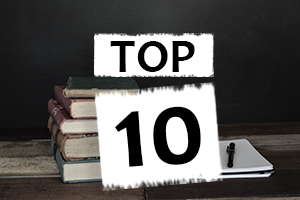
<style>
.page{position:relative;width:300px;height:200px}
.page>*{position:absolute;margin:0}
.t1{font:48px "Candara-Bold";color:#000000}
.t2{font:106.2px "Candara-Bold";color:#000000}
</style>
<div class="page">
<p class="t1" style="left:110px;top:41px;width:85px;height:31px">TOP</p>
<p class="t2" style="left:115px;top:106px;width:86px;height:61px;rotate:-5deg">10</p>
</div>
